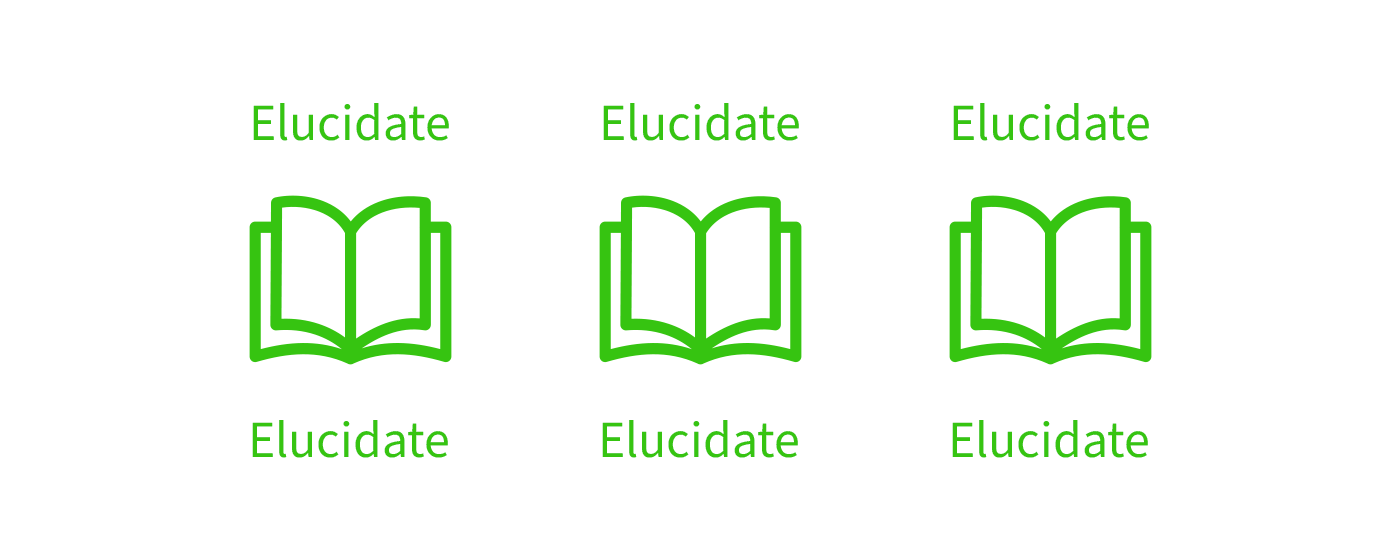
<style>
.page{position:relative;width:1400px;height:560px;background:#ffffff}
.page>*{position:absolute;margin:0}
.t1{font:52px "SourceSans3Roman-Regular";color:#36c411}
</style>
<div class="page">
<p class="t1" style="left:253px;top:103px;width:196px;height:38px">Elucidate</p>
<p class="t1" style="left:603px;top:103px;width:196px;height:38px">Elucidate</p>
<p class="t1" style="left:953px;top:103px;width:196px;height:38px">Elucidate</p>
<p class="t1" style="left:252px;top:420px;width:196px;height:38px">Elucidate</p>
<p class="t1" style="left:602px;top:420px;width:196px;height:38px">Elucidate</p>
<p class="t1" style="left:952px;top:420px;width:196px;height:38px">Elucidate</p>
</div>
